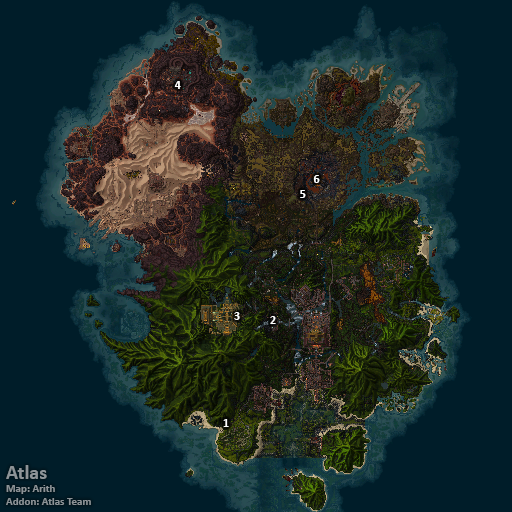
<style>
.page{position:relative;width:512px;height:512px;background:#001d29}
.page>*{position:absolute;margin:0}
.t1{font:12px "Calibri-Bold";color:#ffffff}
.t2{font:11px "Calibri-Bold";color:#8d9397}
.t3{font:20px "Calibri-Bold";color:#8d9397}
</style>
<div class="page">
<p class="t1" style="left:174px;top:81px;width:7px;height:8px">4</p>
<p class="t1" style="left:313px;top:175px;width:7px;height:8px">6</p>
<p class="t1" style="left:300px;top:190px;width:6px;height:8px">5</p>
<p class="t1" style="left:234px;top:312px;width:6px;height:8px">3</p>
<p class="t1" style="left:270px;top:316px;width:6px;height:8px">2</p>
<p class="t1" style="left:223px;top:419px;width:6px;height:8px">1</p>
<p class="t2" style="left:6px;top:465px;width:85px;height:40px"><span class="t3">Atlas<br></span>Map: Arith<br>Addon: Atlas Team</p>
</div>
